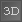
<style>
.page{position:relative;width:22px;height:22px}
.page>*{position:absolute;margin:0}
.t1{font:14px "Courier";color:#d0d0d0}
</style>
<div class="page">
<p class="t1" style="left:4px;top:7px;width:15px;height:8px">3D</p>
</div>
